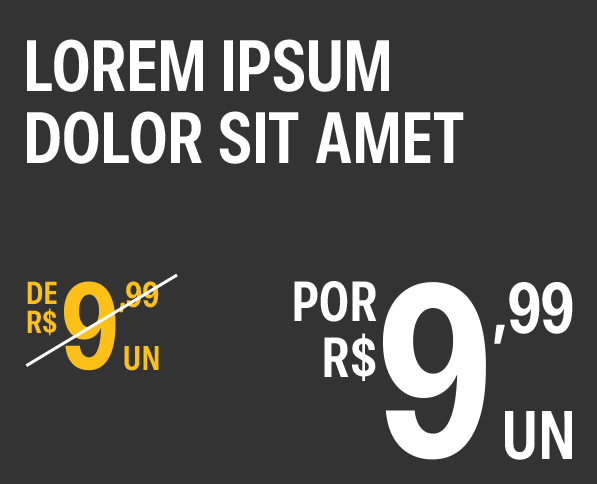
<style>
.page{position:relative;width:597px;height:484px;background:#333333}
.page>*{position:absolute;margin:0}
.t1{font:72px/72px "SFPro-CondensedSemibold";letter-spacing:0.02em;color:#ffffff;text-transform:uppercase}
.t2{font:31.6px/29.2px "SFPro-CondensedSemibold";letter-spacing:0.02em;color:#fcc019;text-transform:uppercase}
.t3{font:122.4px "SFPro-CondensedSemibold";letter-spacing:-0.02em;color:#fcc019;text-transform:uppercase}
.t4{font:61.2px "SFPro-CondensedSemibold";letter-spacing:-0.02em;color:#fcc019}
.t5{font:56px/56px "SFPro-CondensedSemibold";letter-spacing:0.02em;color:#ffffff;text-transform:uppercase}
.t6{font:244.8px "SFPro-CondensedSemibold";letter-spacing:-0.02em;color:#ffffff;text-transform:uppercase}
.t7{font:122.4px "SFPro-CondensedSemibold";letter-spacing:-0.02em;color:#ffffff}
.t8{font:34px "SFPro-CondensedSemibold";letter-spacing:0.02em;color:#fcc019;text-transform:uppercase}
.t9{font:68px "SFPro-CondensedSemibold";letter-spacing:0.02em;color:#ffffff;text-transform:uppercase}
</style>
<div class="page">
<p class="t1" style="left:27px;top:39px;width:437px;height:125px">Lorem ipsum<br>dolor sit amet</p>
<p class="t2" style="left:27px;top:281px;width:30px;height:55px;text-align:right">DE<br>R$</p>
<p class="t3" style="left:64px;top:281px;width:52px;height:90px">9</p>
<p class="t4" style="left:119px;top:281px;width:40px;height:32px">,99</p>
<p class="t5" style="left:294px;top:281px;width:83px;height:100px;text-align:right">POR<br>R$</p>
<p class="t6" style="left:383px;top:282px;width:103px;height:178px">9</p>
<p class="t7" style="left:494px;top:282px;width:79px;height:62px">,99</p>
<p class="t8" style="left:124px;top:346px;width:35px;height:25px">UN</p>
<p class="t9" style="left:505px;top:411px;width:67px;height:49px">UN</p>
</div>
